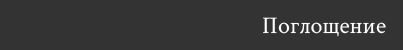
<style>
.page{position:relative;width:403px;height:50px;background:#333333}
.page>*{position:absolute;margin:0}
.t1{font:24px "CrimsonText-Regular";color:#ffffff}
</style>
<div class="page">
<p class="t1" style="left:263px;top:17px;width:123px;height:20px">Поглощение</p>
</div>
